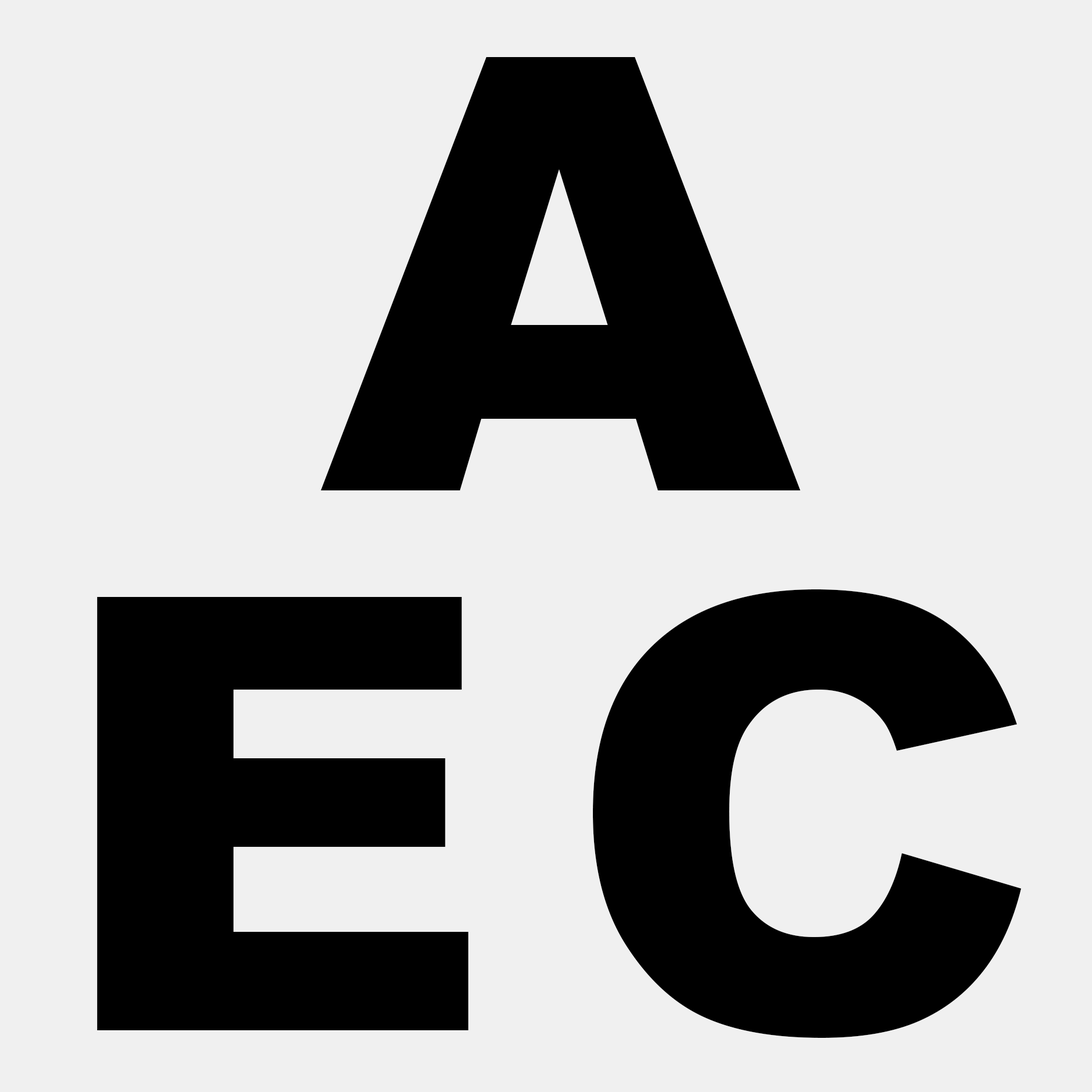
<style>
.page{position:relative;width:1092px;height:1092px;background:#f0f0f0}
.page>*{position:absolute;margin:0}
.t1{font:605.4px "Arial-Black";color:#000000}
</style>
<div class="page">
<p class="t1" style="left:320px;top:57px;width:481px;height:433px">A</p>
<p class="t1" style="left:593px;top:589px;width:429px;height:449px">C</p>
<p class="t1" style="left:97px;top:597px;width:372px;height:433px">E</p>
</div>
